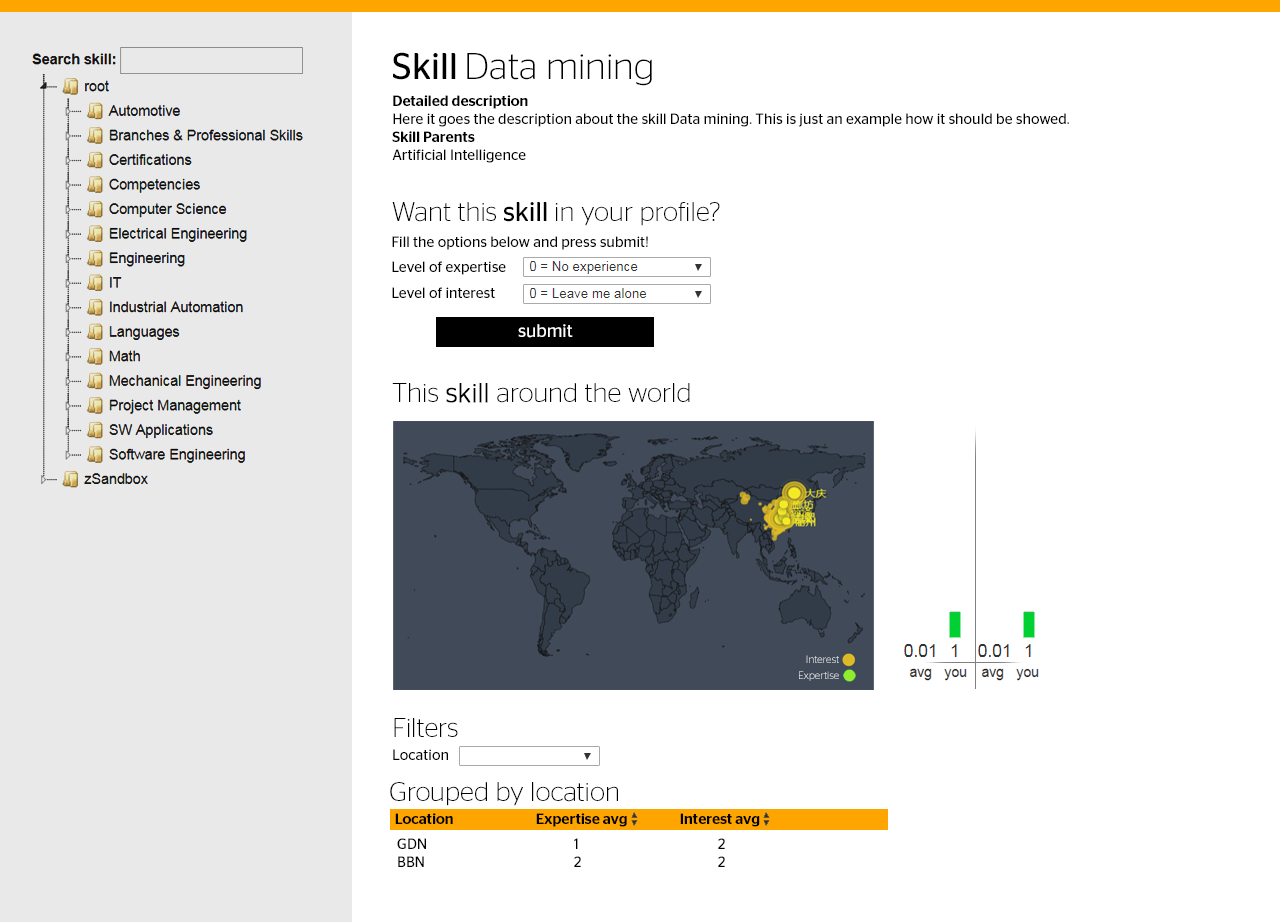
<style>
.page{position:relative;width:1280px;height:922px;background:#ffffff}
.page>*{position:absolute;margin:0}
.t1{font:37.1px "ContinentalStagSans-Light";color:#000000}
.t2{font:37.1px "ContinentalStagSans-Book";color:#000000}
.t3{font:15px "ContinentalStagSans-Book";color:#000000}
.t4{font:15px "ContinentalStagSans-Medium";color:#000000}
.t5{font:27px "ContinentalStagSans-Light";color:#000000}
.t6{font:27px "ContinentalStagSans-Book";color:#000000}
.t7{font:15px/26px "ContinentalStagSans-Book";color:#000000}
.t8{font:18.1px "ContinentalStagSans-Book";color:#ffffff}
.t9{font:27px "ContinentalStagSans-Light";color:#000000;font-weight:bold}
.t10{font:10.7px/16.3px "ContinentalStagSans-Light"}
.t11{font:10.7px "ContinentalStagSans-Light"}
</style>
<div class="page">
<p class="t1" style="left:393px;top:52px;width:259px;height:34px"><span class="t2">Skill </span>Data mining</p>
<p class="t3" style="left:392px;top:95px;width:677px;height:68px"><span class="t4">Detailed description<br></span>Here it goes the description about the skill Data mining. This is just an example how it should be showed. <br><span class="t4">Skill Parents<br></span>Artificial Intelligence</p>
<p class="t5" style="left:392px;top:202px;width:328px;height:24px">Want this<span class="t6"> skill </span>in your profile?</p>
<p class="t3" style="left:392px;top:236px;width:256px;height:14px">Fill the options below and press submit!</p>
<p class="t7" style="left:392px;top:261px;width:114px;height:37px">Level of expertise<br>Level of interest</p>
<p class="t8" style="left:518px;top:324px;width:55px;height:14px">submit</p>
<p class="t5" style="left:392px;top:383px;width:298px;height:20px">This <span class="t9">skill </span>around the world</p>
<p class="t10" style="left:799px;top:655px;width:40px;height:26px;text-align:right"><span class="t11">I</span>nterest<br>Expertise</p>
<p class="t5" style="left:394px;top:718px;width:64px;height:19px">Filters</p>
<p class="t3" style="left:393px;top:749px;width:55px;height:11px">Location</p>
<p class="t5" style="left:390px;top:782px;width:228px;height:24px">Grouped by location</p>
<p class="t4" style="left:395px;top:813px;width:365px;height:14px">Location    Expertise avg  Interest avg</p>
<p class="t3" style="left:397px;top:838px;width:328px;height:29px">GDN     1     2<br> BBN     2    2</p>
</div>
